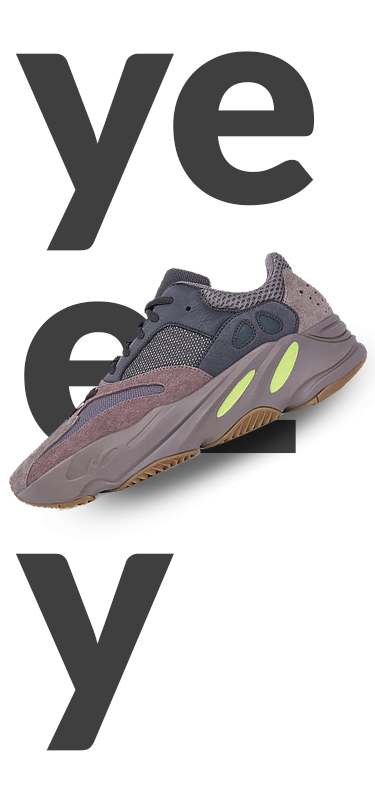
<style>
.page{position:relative;width:375px;height:805px;background:#ffffff}
.page>*{position:absolute;margin:0}
.t1{font:287.5px/250px "Lato-Black";color:#3f3f3f}
</style>
<div class="page">
<p class="t1" style="left:15px;top:51px;width:300px;height:700px">ye<br>ez<br>y</p>
</div>
